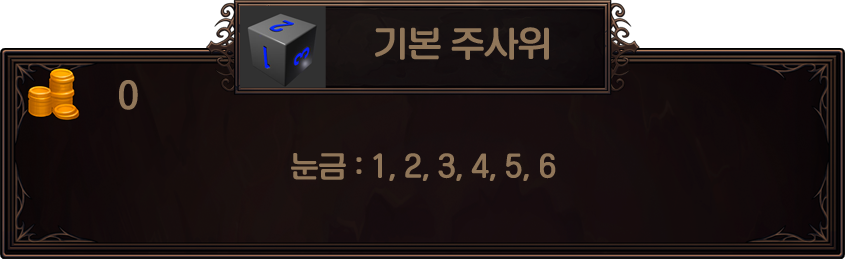
<style>
.page{position:relative;width:845px;height:259px}
.page>*{position:absolute;margin:0}
.t1{font:33.8px "KoreanNGL3-R";color:#907659}
.t2{font:28.2px "KoreanNGL3-R";color:#907659}
</style>
<div class="page">
<p class="t1" style="left:375px;top:27px;width:174px;height:33px">기본 주사위</p>
<p class="t1" style="left:119px;top:80px;width:19px;height:30px">0</p>
<p class="t2" style="left:291px;top:153px;width:265px;height:28px">눈금 : 1, 2, 3, 4, 5, 6</p>
</div>
